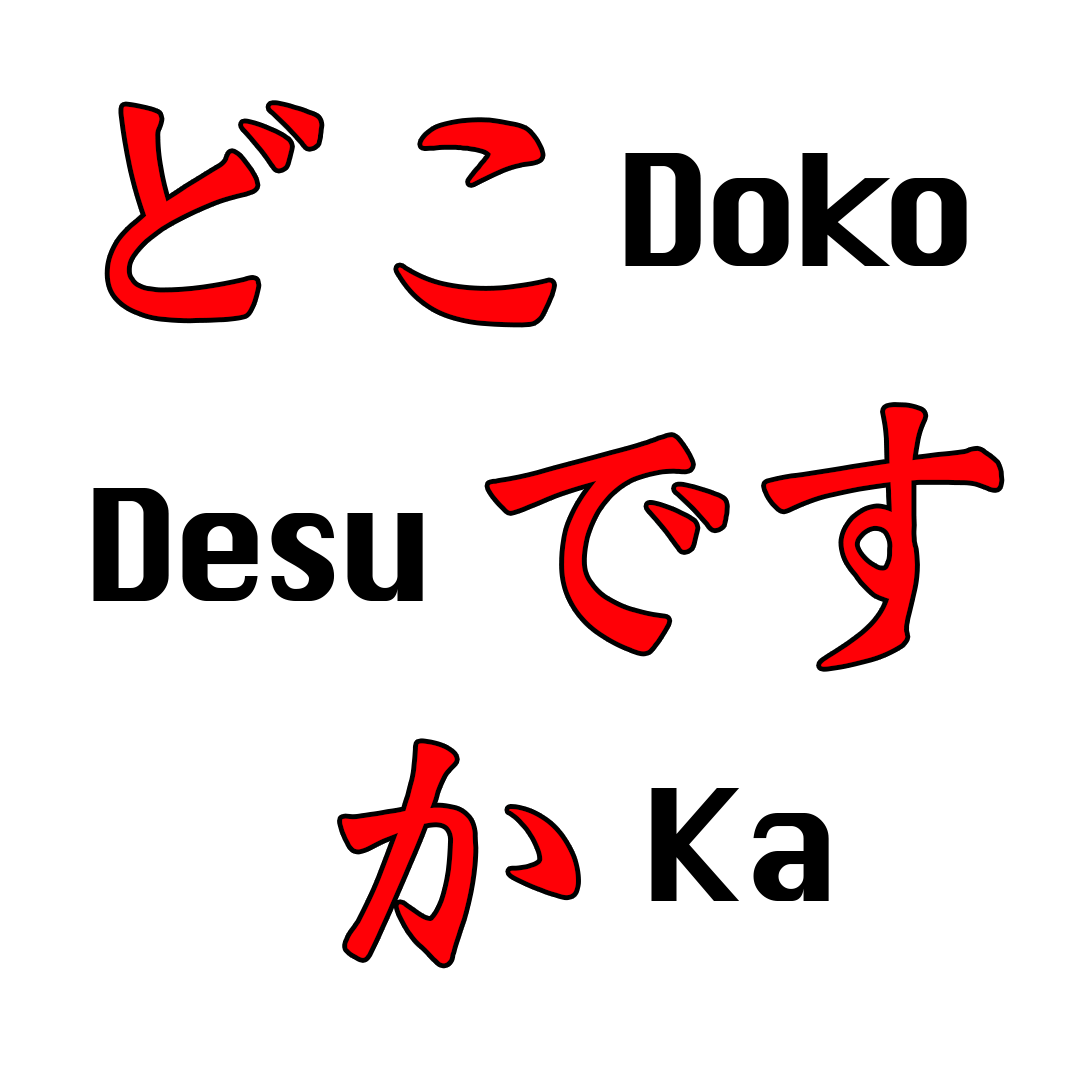
<style>
.page{position:relative;width:1080px;height:1080px;background:#ffffff}
.page>*{position:absolute;margin:0}
.t1{font:320px/320px "Weibei-SC-Bold";letter-spacing:-0.075em;color:#ff0006}
.t2{font:150px "Krungthep";letter-spacing:-0.075em;color:#000000}
</style>
<div class="page">
<p class="t1" style="left:109px;top:105px;width:891px;height:859px">どこ<br>   です<br>  か</p>
<p class="t2" style="left:625px;top:153px;width:342px;height:113px">Doko</p>
<p class="t2" style="left:93px;top:488px;width:330px;height:113px">Desu</p>
<p class="t2" style="left:651px;top:788px;width:178px;height:113px">Ka</p>
</div>
